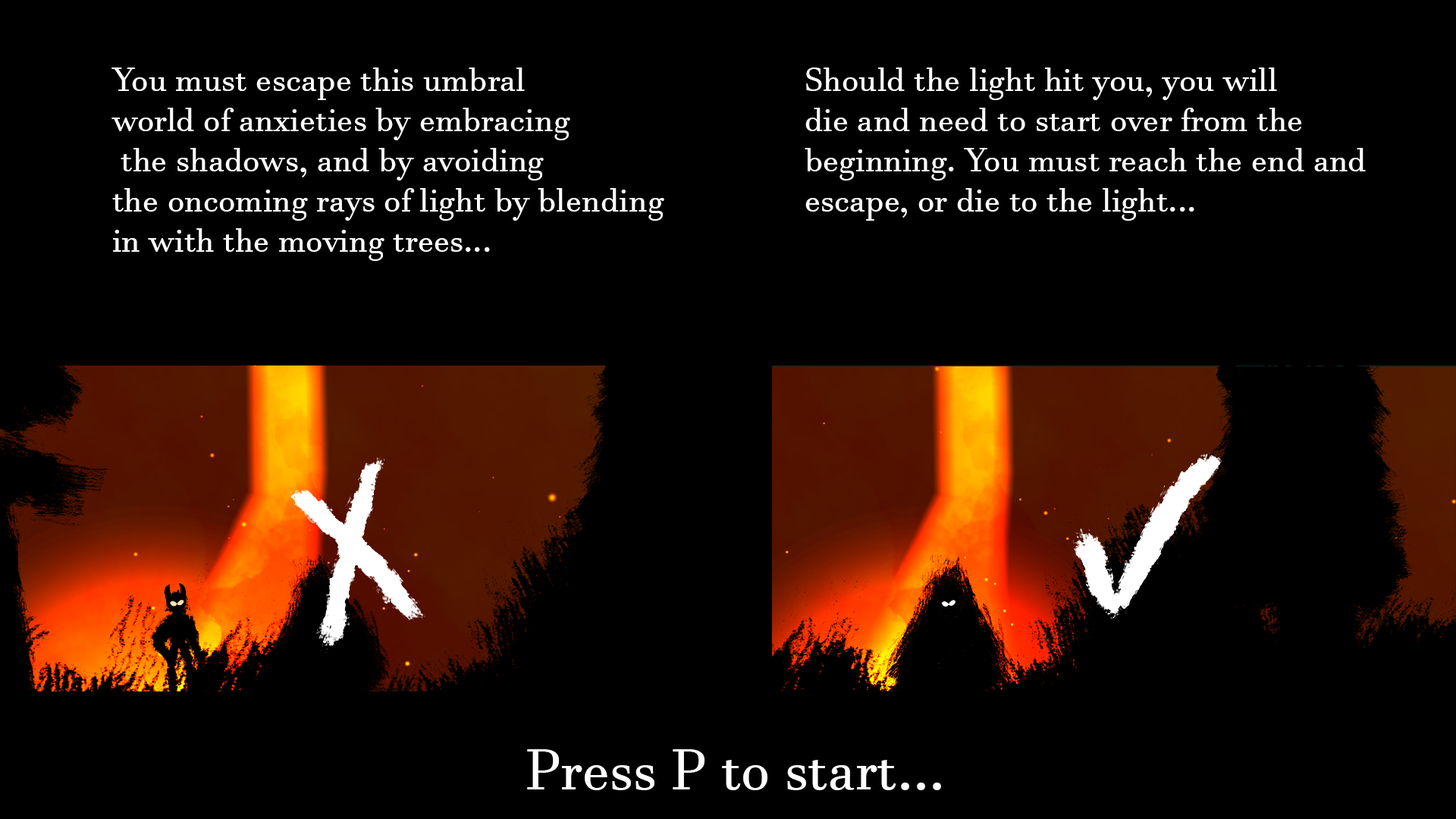
<style>
.page{position:relative;width:1456px;height:819px;background:#000000}
.page>*{position:absolute;margin:0}
.t1{font:33.5px "JavaneseText";color:#ffffff}
.t2{font:56.9px "JavaneseText";color:#ffffff}
</style>
<div class="page">
<p class="t1" style="left:111px;top:67px;width:553px;height:194px">You must escape this umbral <br>world of anxieties by embracing<br> the shadows, and by avoiding  <br>the oncoming rays of light by blending <br>in with the moving trees...</p>
<p class="t1" style="left:805px;top:67px;width:561px;height:154px">Should the light hit you, you will <br>die and need to start over from the <br>beginning. You must reach the end and <br>escape, or die to the light...</p>
<p class="t2" style="left:527px;top:749px;width:414px;height:41px">Press P to start...</p>
</div>
